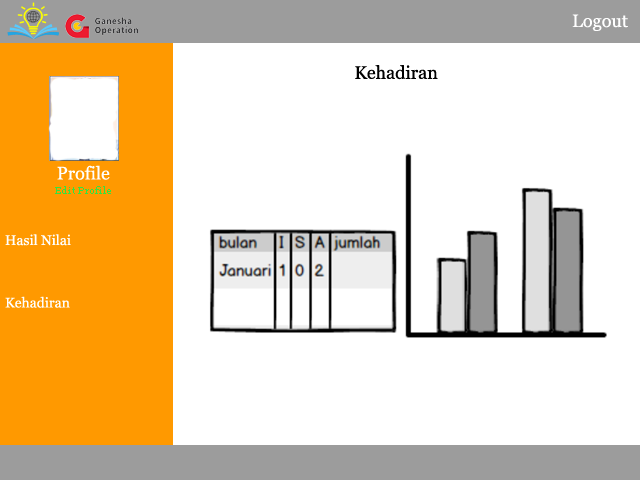
<style>
.page{position:relative;width:640px;height:480px;background:#ffffff}
.page>*{position:absolute;margin:0}
.t1{font:18px "Georgia";color:#ffffff}
.t2{font:18px "Georgia";color:#000000}
.t3{font:10px "Georgia";color:#34e340}
.t4{font:14px "Georgia";color:#ffffff}
</style>
<div class="page">
<p class="t1" style="left:572px;top:14px;width:56px;height:17px">Logout</p>
<p class="t2" style="left:355px;top:65px;width:83px;height:15px">Kehadiran</p>
<p class="t1" style="left:57px;top:165px;width:53px;height:15px">Profile</p>
<p class="t3" style="left:55px;top:186px;width:56px;height:8px">Edit Profile</p>
<p class="t4" style="left:5px;top:234px;width:66px;height:12px">Hasil Nilai</p>
<p class="t4" style="left:5px;top:296px;width:65px;height:12px">Kehadiran</p>
</div>
